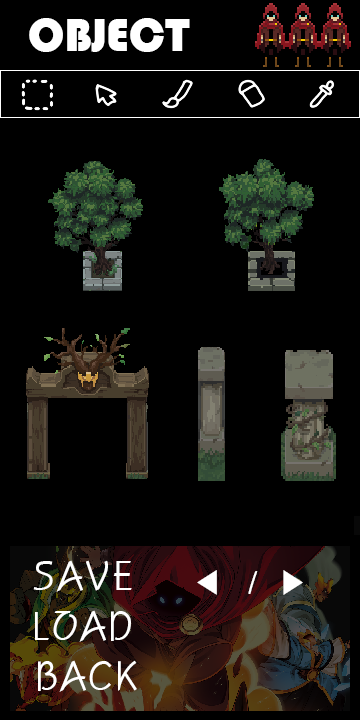
<style>
.page{position:relative;width:360px;height:720px;background:#000000}
.page>*{position:absolute;margin:0}
.t1{font:48px "Bauhaus93";color:#ffffff}
.t2{font:40px "H2porL";color:#ffffff}
.t3{font:32px "Gulim";color:#ffffff}
.t4{font:32px "PyunjiR-HM";color:#ffffff}
</style>
<div class="page">
<p class="t1" style="left:29px;top:18px;width:161px;height:34px">OBJECT</p>
<p class="t2" style="left:33px;top:560px;width:99px;height:32px">SAVE</p>
<p class="t3" style="left:197px;top:570px;width:106px;height:25px">◀     ▶</p>
<p class="t4" style="left:248px;top:571px;width:10px;height:23px">1</p>
<p class="t2" style="left:35px;top:610px;width:96px;height:32px">LOAD</p>
<p class="t2" style="left:38px;top:660px;width:99px;height:32px">BACK</p>
</div>
